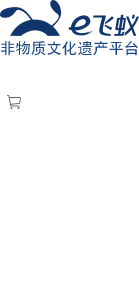
<style>
.page{position:relative;width:139px;height:298px;background:#ffffff}
.page>*{position:absolute;margin:0}
.t1{font:15px "CTHeiTiSJ";letter-spacing:0.05em;color:#1d4783}
</style>
<div class="page">
<p class="t1" style="left:1px;top:41px;width:137px;height:15px">非物质文化遗产平台</p>
</div>
